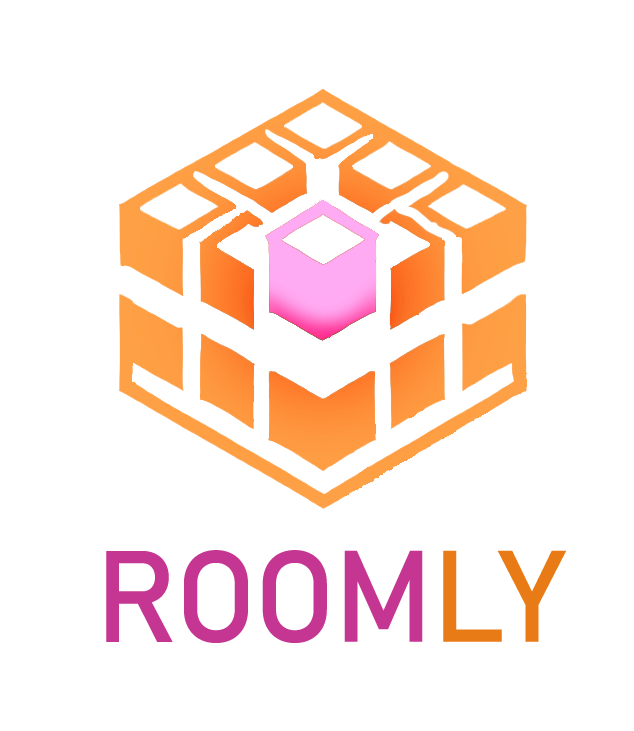
<style>
.page{position:relative;width:634px;height:731px;background:#ffffff}
.page>*{position:absolute;margin:0}
.t1{font:128px "Bahnschrift";letter-spacing:-0.01em;color:#c53592}
.t2{font:128px "Bahnschrift";letter-spacing:-0.01em;color:#e97b16}
</style>
<div class="page">
<p class="t1" style="left:106px;top:550px;width:461px;height:93px">ROOM<span class="t2">LY</span></p>
</div>
